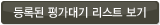
<style>
.page{position:relative;width:160px;height:25px;background:#444337}
.page>*{position:absolute;margin:0}
.t1{font:12.1px "YDIYGO330";color:#ffffff;scale:0.91 1}
</style>
<div class="page">
<p class="t1" style="left:13px;top:7px;width:133px;height:11px">등록된 평가대기 리스트 보기</p>
</div>
